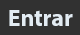
<style>
.page{position:relative;width:80px;height:35px;background:#313131}
.page>*{position:absolute;margin:0}
.t1{font:23.5px "MyriadPro-Bold";color:#e3ecf3}
</style>
<div class="page">
<p class="t1" style="left:9px;top:10px;width:64px;height:16px">Entrar</p>
</div>
